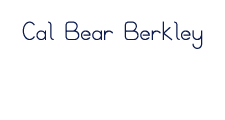
<style>
.page{position:relative;width:225px;height:120px;background:#ffffff}
.page>*{position:absolute;margin:0}
.t1{font:23.1px "BloomingGrove";color:#0c1b4f}
</style>
<div class="page">
<p class="t1" style="left:22px;top:21px;width:181px;height:28px">Cal Bear Berkley</p>
</div>
